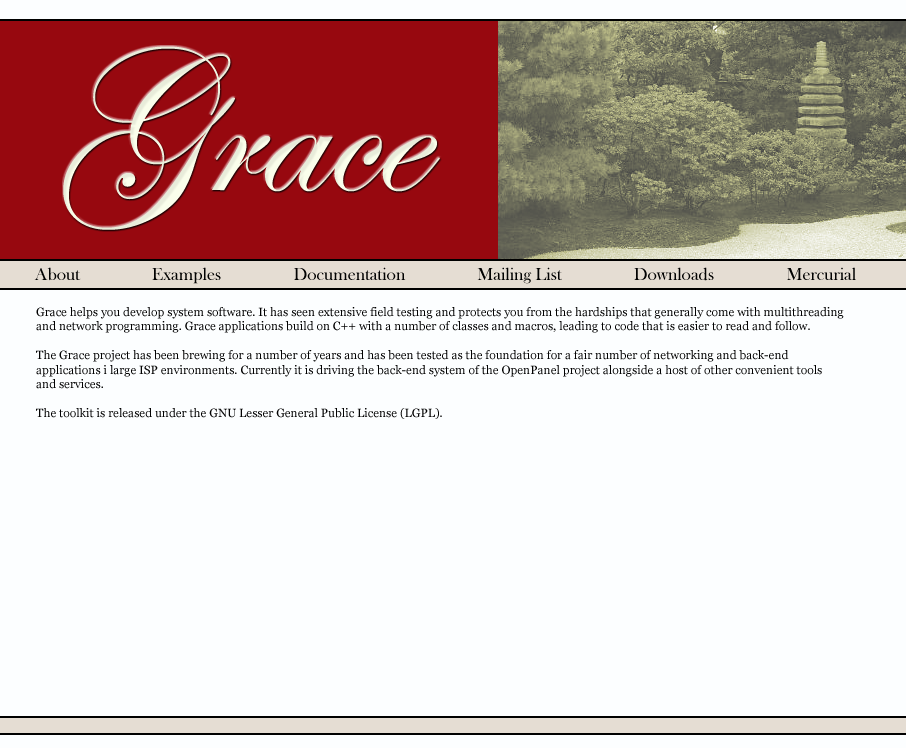
<style>
.page{position:relative;width:906px;height:748px;background:#fcfeff}
.page>*{position:absolute;margin:0}
.t1{font:200px "EdwardianScriptITC";color:#fafeeb}
.t2{font:18px "BaskOldFace";color:#020202}
.t3{font:12px "Georgia";color:#020202}
</style>
<div class="page">
<p class="t1" style="left:63px;top:46px;width:377px;height:184px">Grace</p>
<p class="t2" style="left:34px;top:267px;width:822px;height:17px">About                Examples                Documentation                Mailing List                Downloads                Mercurial</p>
<p class="t3" style="left:36px;top:307px;width:808px;height:112px">Grace helps you develop system software. It has seen extensive field testing and protects you from the hardships that generally come with multithreading<br>and network programming. Grace applications build on C++ with a number of classes and macros, leading to code that is easier to read and follow. <br><br>The Grace project has been brewing for a number of years and has been tested as the foundation for a fair number of networking and back-end<br>applications i large ISP environments. Currently it is driving the back-end system of the OpenPanel project alongside a host of other convenient tools<br>and services.<br><br>The toolkit is released under the GNU Lesser General Public License (LGPL).</p>
</div>
